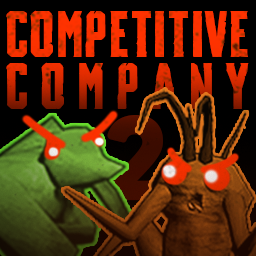
<style>
.page{position:relative;width:256px;height:256px;background:#000000}
.page>*{position:absolute;margin:0}
.t1{font:65.9px/52px "DestructionManual"}
</style>
<div class="page">
<p class="t1" style="left:6px;top:10px;width:243px;height:100px;text-align:justify">COMPETITIVE<br>COMPANY</p>
</div>
